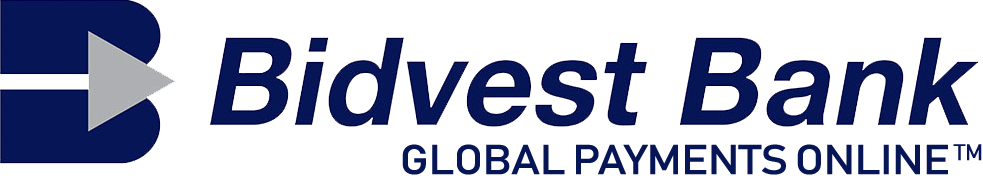
<style>
.page{position:relative;width:983px;height:179px;background:#ffffff}
.page>*{position:absolute;margin:0}
.t1{font:40.9px "Bahnschrift";letter-spacing:-0.04em;color:#061556;font-weight:bold;scale:1.11 1}
.t2{font:22.3px "Bahnschrift";color:#061556;font-weight:bold}
</style>
<div class="page">
<p class="t1" style="left:402px;top:144px;width:546px;height:31px">GLOBAL PAYMENTS ONLINE</p>
<p class="t2" style="left:953px;top:144px;width:29px;height:17px">TM</p>
</div>
